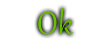
<style>
.page{position:relative;width:109px;height:45px;background:#ffffff}
.page>*{position:absolute;margin:0}
.t1{font:39px "Gabriola";color:#67bf00}
</style>
<div class="page">
<p class="t1" style="left:38px;top:8px;width:36px;height:27px">Ok</p>
</div>
